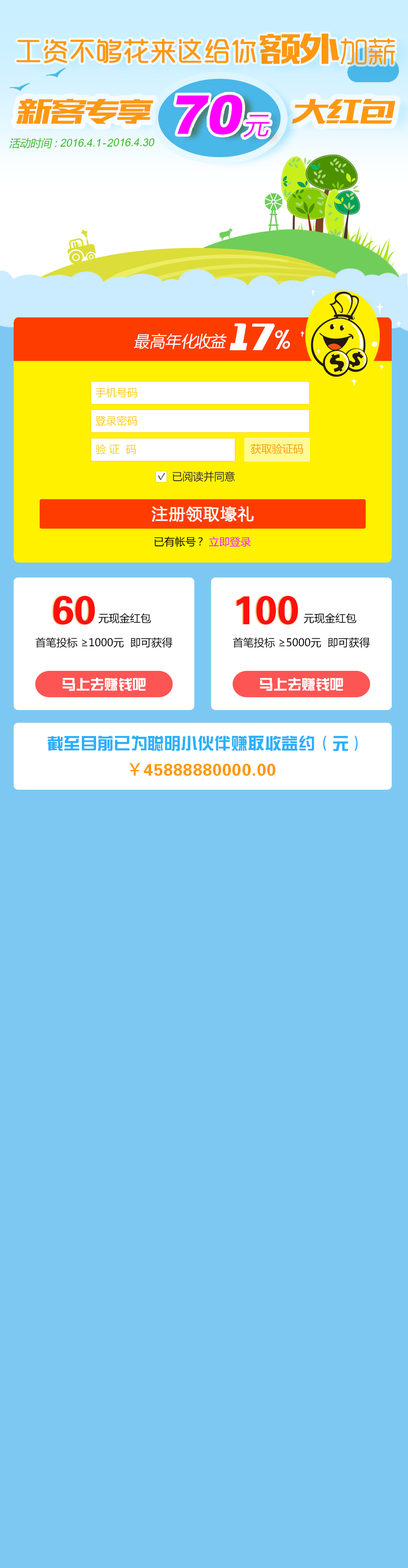
<style>
.page{position:relative;width:408px;height:1568px;background:#7dc8f3}
.page>*{position:absolute;margin:0}
.t1{font:26.3px "MFYueYuan_Noncommercial-Regular";color:#ff9810;font-weight:bold}
.t2{font:40.5px "MFBanHei_Noncommercial-Regular";letter-spacing:-0.025em;color:#ff9810}
.t3{font:29.2px "MFYueYuan_Noncommercial-Regular";letter-spacing:-0.025em;color:#ff9810}
.t4{font:33.3px "MFBanHei_Noncommercial-Regular";color:#ff9810;font-style:italic}
.t5{font:53.9px "Arial-Black";color:#ff00ff;font-style:italic}
.t6{font:53.9px "Arial-Black";letter-spacing:0.05em;color:#ff00ff;font-style:italic}
.t7{font:25px "MicrosoftYaHei";color:#ff00ff;font-style:italic}
.t8{font:10.8px "ArialMT";color:#36ba1a;font-style:italic}
.t9{font:10.8px "MicrosoftYaHei";color:#36ba1a;font-style:italic}
.t10{font:10.8px "MicrosoftYaHei";letter-spacing:-0.1em;color:#36ba1a;font-style:italic}
.t11{font:10.8px "ArialMT";letter-spacing:0.1em;color:#36ba1a;font-style:italic}
.t12{font:15.8px "MicrosoftYaHei";color:#ffffff;font-style:italic}
.t13{font:15.8px "MicrosoftYaHei";letter-spacing:-0.075em;color:#ffffff;font-style:italic}
.t14{font:41.6px "MFWenYan_Noncommercial-Regular";color:#ffffff;font-style:italic}
.t15{font:29.1px "MFWenYan_Noncommercial-Regular";letter-spacing:0.025em;color:#ffffff;font-style:italic}
.t16{font:10.6px "MicrosoftYaHei";color:#ffcc07}
.t17{font:10.6px "MicrosoftYaHei";color:#ff9c00}
.t18{font:10.7px "MicrosoftYaHei";color:#313131}
.t19{font:15.8px "MicrosoftYaHei";letter-spacing:0.05em;color:#ffffff;font-weight:bold}
.t20{font:10.6px "MicrosoftYaHei";color:#ff00ff}
.t21{font:10.6px "MicrosoftYaHei";color:#000000}
.t22{font:10.6px "MicrosoftYaHei";letter-spacing:-0.1em;color:#000000}
.t23{font:40.1px "FZZYJW--GB1-0";color:#ff100f}
.t24{font:14.1px "FZZYJW--GB1-0";color:#ffffff}
.t25{font:16.7px "FZZYJW--GB1-0";color:#29b0fe}
.t26{font:16.7px "FZZYJW--GB1-0";letter-spacing:0.05em;color:#29b0fe}
.t27{font:16.9px "FZZYJW--GB1-0";letter-spacing:0.025em;color:#ff9810}
.t28{font:16.9px "AdobeHeitiStd-Regular";letter-spacing:0.025em;color:#ff9810}
</style>
<div class="page">
<p class="t1" style="left:16px;top:39px;width:240px;height:24px">工资不够花来这给你</p>
<p class="t2" style="left:259px;top:33px;width:136px;height:32px">额外<span class="t3">加薪</span></p>
<p class="t4" style="left:16px;top:99px;width:379px;height:25px">新客专享                   大红包</p>
<p class="t5" style="left:176px;top:94px;width:94px;height:43px">7<span class="t6">0</span><span class="t7">元</span></p>
<p class="t8" style="left:9px;top:138px;width:146px;height:11px"><span class="t9">活动时</span><span class="t10">间：</span>2016.4.<span class="t11">1-</span>2016.4.30</p>
<p class="t12" style="left:134px;top:323px;width:156px;height:27px">最高年<span class="t13">化收益 </span><span class="t14">17</span><span class="t15">%</span></p>
<p class="t16" style="left:96px;top:387px;width:41px;height:11px">手机号码</p>
<p class="t16" style="left:95px;top:416px;width:42px;height:10px">登录密码</p>
<p class="t16" style="left:95px;top:444px;width:41px;height:10px">验 证  码</p>
<p class="t17" style="left:250px;top:444px;width:53px;height:10px">获取验证码</p>
<p class="t18" style="left:173px;top:471px;width:62px;height:11px">已阅读并同意</p>
<p class="t19" style="left:151px;top:506px;width:103px;height:16px">注册领取壕礼</p>
<p class="t20" style="left:154px;top:536px;width:97px;height:11px"><span class="t21">已有帐</span><span class="t22">号</span><span class="t21">？ </span>立即登录</p>
<p class="t23" style="left:53px;top:596px;width:42px;height:29px">60</p>
<p class="t23" style="left:236px;top:596px;width:62px;height:29px">100</p>
<p class="t21" style="left:98px;top:613px;width:53px;height:10px">元现金红包</p>
<p class="t21" style="left:303px;top:613px;width:53px;height:10px">元现金红包</p>
<p class="t21" style="left:35px;top:637px;width:138px;height:11px">首笔投标 ≥1000元  即可获得</p>
<p class="t21" style="left:232px;top:637px;width:138px;height:11px">首笔投标 ≥5000元  即可获得</p>
<p class="t24" style="left:63px;top:677px;width:83px;height:14px">马上去赚钱吧</p>
<p class="t24" style="left:260px;top:677px;width:83px;height:14px">马上去赚钱吧</p>
<p class="t25" style="left:48px;top:736px;width:309px;height:15px">截至目前已为聪明小伙伴赚取收益<span class="t26">约</span>（元）</p>
<p class="t27" style="left:129px;top:763px;width:146px;height:13px"><span class="t28">￥</span>45888880000.00</p>
</div>
